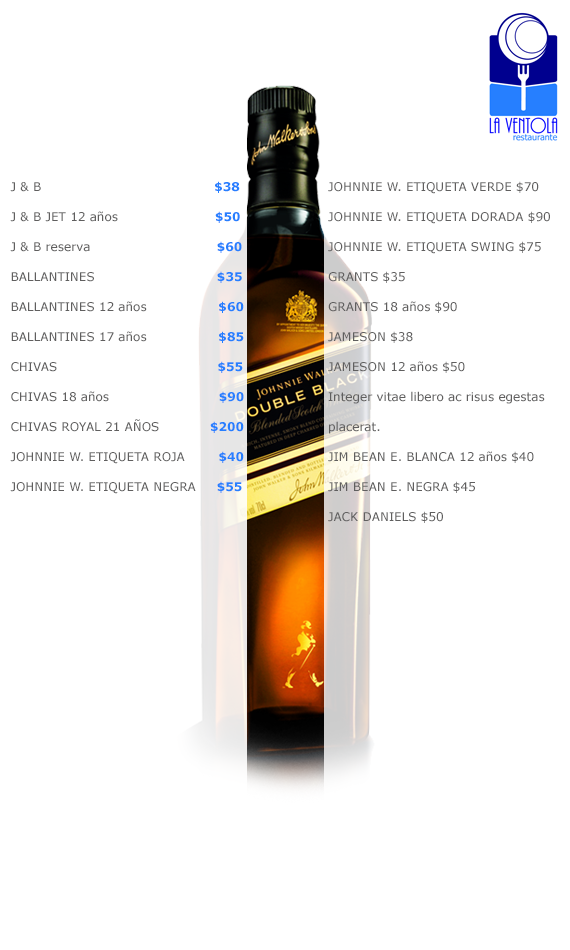
<style>
.page{position:relative;width:570px;height:950px;background:#ffffff}
.page>*{position:absolute;margin:0}
.t1{font:12px/30px "Verdana";color:#605f5f}
.t2{font:12px/30px "Verdana-Bold";color:#267fff}
</style>
<div class="page">
<p class="t1" style="left:10px;top:181px;width:234px;height:313px;text-align:justify">J &amp; B                                         <span class="t2">$38<br></span>  J &amp; B JET 12 años                       <span class="t2">$50<br></span>  J &amp; B reserva                             <span class="t2"> $60<br></span>  BALLANTINES                            <span class="t2"> $35<br></span>  BALLANTINES 12 años                 <span class="t2">$60<br></span>  BALLANTINES 17 años                 <span class="t2">$85<br></span>  CHIVAS                                      <span class="t2">$55<br></span>  CHIVAS 18 años                          <span class="t2">$90<br></span>  CHIVAS ROYAL 21 AÑOS            <span class="t2">$200<br></span>  JOHNNIE W. ETIQUETA ROJA        <span class="t2">$40<br></span>  JOHNNIE W. ETIQUETA NEGRA    <span class="t2"> $55</span></p>
<p class="t1" style="left:328px;top:181px;width:222px;height:342px">JOHNNIE W. ETIQUETA VERDE $70<br>JOHNNIE W. ETIQUETA DORADA $90<br>JOHNNIE W. ETIQUETA SWING $75<br>GRANTS $35<br>GRANTS 18 años $90<br>JAMESON $38<br>JAMESON 12 años $50<br>Integer vitae libero ac risus egestas placerat.<br>JIM BEAN E. BLANCA 12 años $40<br>JIM BEAN E. NEGRA $45<br>JACK DANIELS $50</p>
</div>
